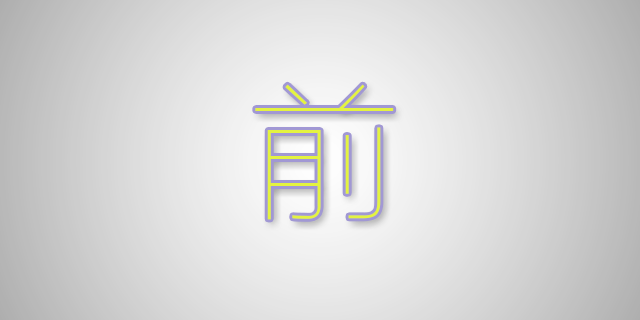
<style>
.page{position:relative;width:640px;height:320px}
.page>*{position:absolute;margin:0}
.t1{font:150px "FZLTCXHJW--GB1-0";color:#e4f340}
</style>
<div class="page">
<p class="t1" style="left:255px;top:84px;width:139px;height:136px">前</p>
</div>
